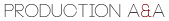
<style>
.page{position:relative;width:169px;height:21px;background:#ffffff}
.page>*{position:absolute;margin:0}
.t1{font:18px "Neou-Thin";color:#404040}
.t2{font:18px "Neou-Thin";color:#800409}
</style>
<div class="page">
<p class="t1" style="left:4px;top:4px;width:161px;height:13px">Production A<span class="t2">&amp;</span>a</p>
</div>
